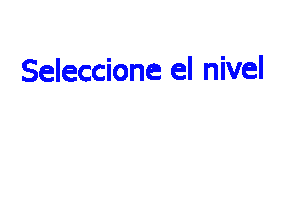
<style>
.page{position:relative;width:300px;height:200px;background:#ffffff}
.page>*{position:absolute;margin:0}
.t1{font:30px "Tahoma";color:#0309ff}
</style>
<div class="page">
<p class="t1" style="left:22px;top:55px;width:241px;height:27px">Seleccione el nivel</p>
</div>
